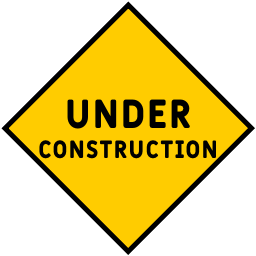
<style>
.page{position:relative;width:256px;height:256px;background:#ffffff}
.page>*{position:absolute;margin:0}
.t1{font:24.8px "Fulbo-Retro";color:#000000}
.t2{font:40.3px "Fulbo-Retro";color:#000000}
</style>
<div class="page">
<p class="t1" style="left:39px;top:99px;width:177px;height:60px;text-align:center"><span class="t2">UNDER<br></span>CONSTRUCTION</p>
</div>
